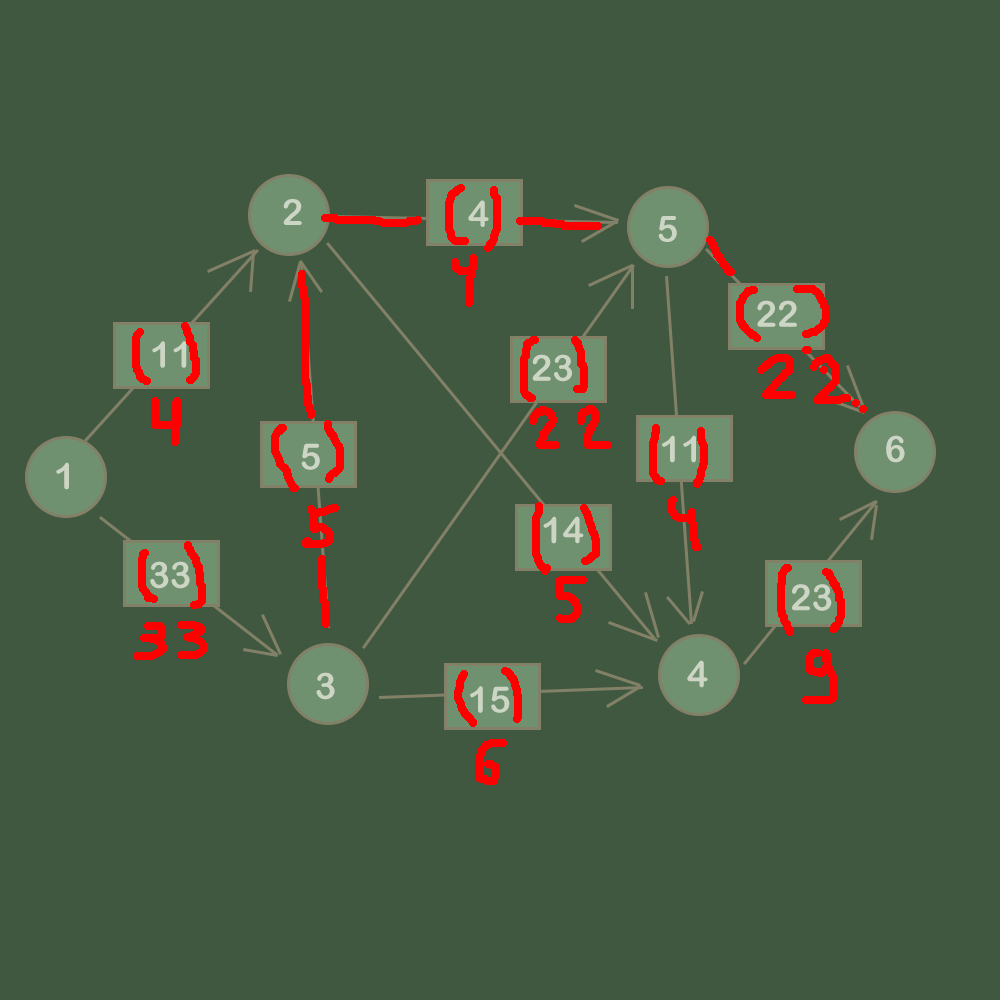
<style>
.page{position:relative;width:1000px;height:1000px;background:#405840}
.page>*{position:absolute;margin:0}
.t1{font:36px "ArialRoundedMTBold";color:#cdd6c5}
</style>
<div class="page">
<p class="t1" style="left:283px;top:199px;width:19px;height:26px">2</p>
<p class="t1" style="left:468px;top:200px;width:21px;height:27px">4</p>
<p class="t1" style="left:658px;top:216px;width:19px;height:26px">5</p>
<p class="t1" style="left:757px;top:300px;width:40px;height:27px">22</p>
<p class="t1" style="left:532px;top:354px;width:40px;height:28px">23</p>
<p class="t1" style="left:662px;top:435px;width:34px;height:28px">11</p>
<p class="t1" style="left:886px;top:435px;width:19px;height:28px">6</p>
<p class="t1" style="left:301px;top:443px;width:19px;height:27px">5</p>
<p class="t1" style="left:56px;top:462px;width:13px;height:28px">1</p>
<p class="t1" style="left:543px;top:516px;width:41px;height:28px">14</p>
<p class="t1" style="left:150px;top:561px;width:40px;height:28px">33</p>
<p class="t1" style="left:792px;top:584px;width:40px;height:27px">23</p>
<p class="t1" style="left:687px;top:660px;width:21px;height:28px">4</p>
<p class="t1" style="left:316px;top:672px;width:19px;height:28px">3</p>
<p class="t1" style="left:470px;top:686px;width:40px;height:27px">15</p>
</div>
